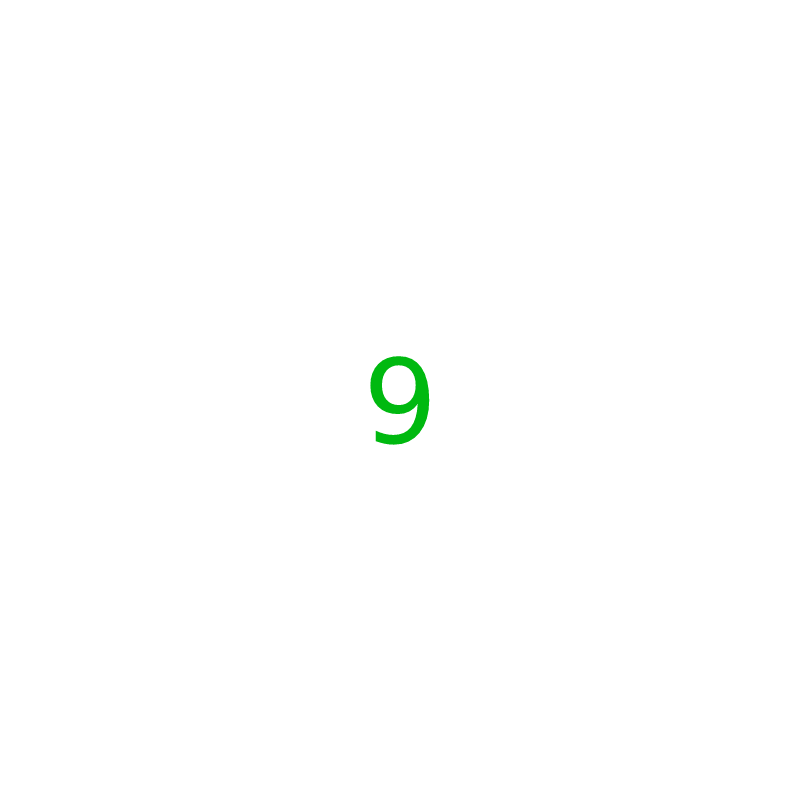
<style>
.page{position:relative;width:800px;height:800px;background:#ffffff}
.page>*{position:absolute;margin:0}
.t1{font:117px "DejaVuSans";color:#00b910}
</style>
<div class="page">
<p class="t1" style="left:370px;top:356px;width:60px;height:89px">9</p>
</div>
